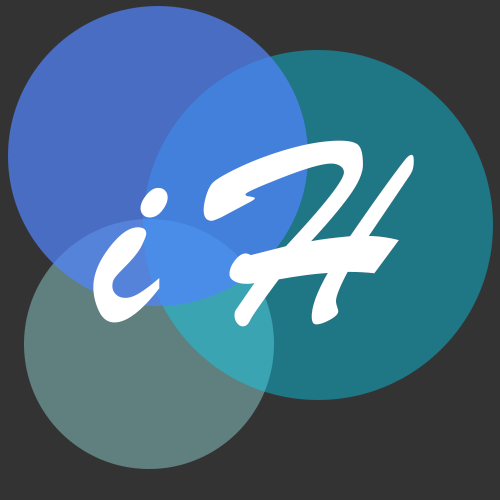
<style>
.page{position:relative;width:500px;height:500px;background:#333333}
.page>*{position:absolute;margin:0}
.t1{font:277.8px "STXingkai";color:#ffffff}
</style>
<div class="page">
<p class="t1" style="left:93px;top:140px;width:321px;height:187px">i H</p>
</div>
